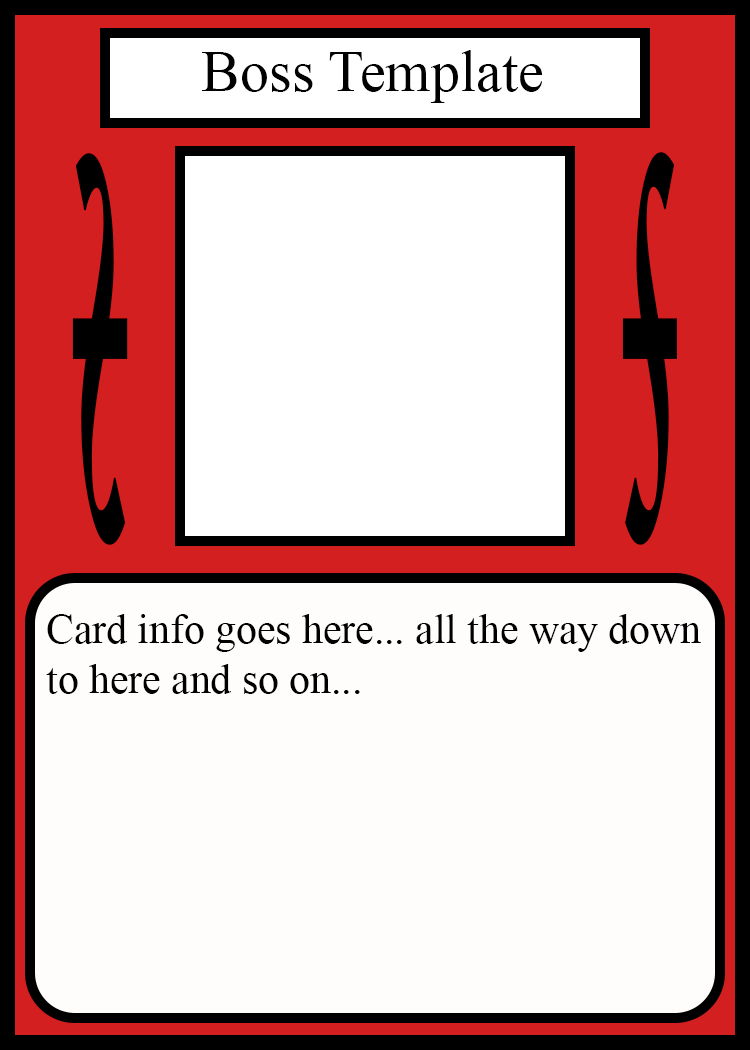
<style>
.page{position:relative;width:750px;height:1050px;background:#fffcfc}
.page>*{position:absolute;margin:0}
.t1{font:58.3px "TimesNewRomanPSMT";color:#010101}
.t2{font:814.3px "Apple-Chancery";color:#000000;font-weight:bold;scale:0.17 1}
.t3{font:814.6px "Apple-Chancery";color:#000000;font-weight:bold;scale:0.17 1}
.t4{font:41.7px "TimesNewRomanPSMT";color:#000000}
</style>
<div class="page">
<p class="t1" style="left:202px;top:50px;width:341px;height:53px">Boss Template</p>
<p class="t2" style="left:72px;top:153px;width:56px;height:392px;rotate:180deg">s</p>
<p class="t3" style="left:622px;top:152px;width:55px;height:393px">s</p>
<p class="t4" style="left:46px;top:614px;width:655px;height:80px">Card info goes here... all the way down<br>to here and so on...</p>
</div>
